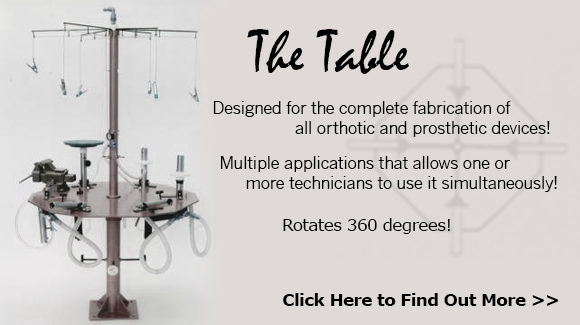
<style>
.page{position:relative;width:580px;height:325px;background:#dfdad7}
.page>*{position:absolute;margin:0}
.t1{font:61px "Mistral";color:#000000}
.t2{font:17px "NewsGothicMT";letter-spacing:-0.04em;color:#000000}
.t3{font:17px "Verdana";letter-spacing:-0.04em;color:#000000}
.t4{font:17px "Verdana-Bold";letter-spacing:-0.04em;color:#000000}
</style>
<div class="page">
<p class="t1" style="left:247px;top:29px;width:162px;height:45px">The Table</p>
<p class="t2" style="left:213px;top:101px;width:337px;height:36px;text-align:center">Designed for the complete fabrication of <br>                         all orthotic and prosthetic devices!</p>
<p class="t2" style="left:221px;top:156px;width:336px;height:36px;text-align:center">Multiple applications that allows one or <br>               more technicians to use it simultaneously!</p>
<p class="t3" style="left:283px;top:218px;width:167px;height:16px">Rotates 360 degrees!</p>
<p class="t4" style="left:283px;top:293px;width:276px;height:13px">Click Here to Find Out More &gt;&gt;</p>
</div>
